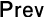
<style>
.page{position:relative;width:45px;height:17px;background:#ffffff}
.page>*{position:absolute;margin:0}
.t1{font:22px "GrotesqueMTStd";color:#000000}
</style>
<div class="page">
<p class="t1" style="left:0px;top:1px;width:44px;height:17px">Prev</p>
</div>
